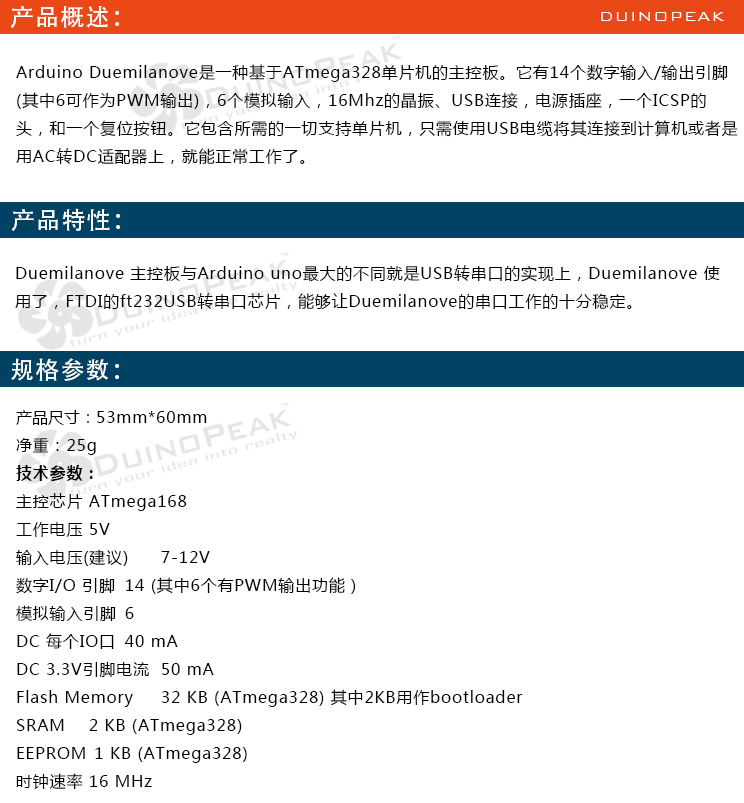
<style>
.page{position:relative;width:744px;height:803px;background:#ffffff}
.page>*{position:absolute;margin:0}
.t1{font:24px "AdobeHeitiStd-Regular";letter-spacing:0.05em;color:#ffffff}
.t2{font:18px "BankGothicBT-Light";letter-spacing:0.05em;color:#ffffff}
.t3{font:16px "MicrosoftYaHei";letter-spacing:0.05em;color:#000000}
.t4{font:16px "MicrosoftYaHei";color:#000000}
.t5{font:16px "MicrosoftYaHei-Bold";letter-spacing:0.05em;color:#000000}
</style>
<div class="page">
<p class="t1" style="left:10px;top:6px;width:109px;height:23px">产品概述：</p>
<p class="t2" style="left:601px;top:12px;width:124px;height:9px">DUINOPEAK</p>
<p class="t3" style="left:16px;top:64px;width:722px;height:101px">Arduino Duemilanove是一种基于ATmega328单片机的主控板。它有14个数字输入/输出引脚<br>(其中6可作为PWM输出)，6个模拟输入，16Mhz的晶振、USB连接，电源插座，一个ICSP的<br>头，和一个复位按钮。它包含所需的一切支持单片机，只需使用USB电缆将其连接到计算机或者是<br>用AC转DC适配器上，就能正常工作了。</p>
<p class="t1" style="left:11px;top:208px;width:109px;height:24px">产品特性：</p>
<p class="t3" style="left:15px;top:265px;width:705px;height:45px">Duemilanove 主控板与Arduino uno最大的不同就是USB转串口的实现上，Duemilanove 使<br>用了，FTDI的ft232USB转串口芯片，能够让Duemilanove的串口工作的十分稳定。</p>
<p class="t1" style="left:11px;top:358px;width:108px;height:23px">规格参数：</p>
<p class="t3" style="left:16px;top:410px;width:507px;height:380px"><span class="t4">产品尺寸：</span>53mm*60mm<br>净重：25g<br><span class="t5">技术参数：</span><br>主控芯片 ATmega168<br>工作电压 5V<br>输入电压(建议) 7-12V<br>数字I/O 引脚 14 (其中6个有PWM输出功能）<br>模拟输入引脚 6<br>DC 每个IO口 40 mA<br>DC 3.3V引脚电流 50 mA<br>Flash Memory 32 KB (ATmega328) 其中2KB用作bootloader<br>SRAM 2 KB (ATmega328)<br>EEPROM  1 KB (ATmega328)<br>时钟速率 16 MHz</p>
</div>
